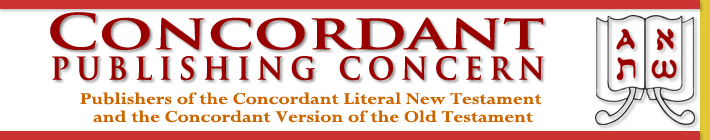
<style>
.page{position:relative;width:710px;height:140px;background:#ffffff}
.page>*{position:absolute;margin:0}
.t1{font:48px "TrajanPro-Bold";color:#990000;scale:1.36 1}
.t2{font:36px "TrajanPro-Bold";letter-spacing:0.2em;color:#990000;scale:0.9 1}
.t3{font:18px/18px "Perpetua-Bold";color:#cc6600;scale:1.16 1}
</style>
<div class="page">
<p class="t1" style="left:50px;top:12px;width:494px;height:38px">Concordant</p>
<p class="t2" style="left:52px;top:56px;width:492px;height:25px">publishing concern</p>
<p class="t3" style="left:80px;top:92px;width:462px;height:31px;text-align:center">Publishers of the Concordant Literal New Testament<br> and the Concordant Version of the Old Testament</p>
</div>
